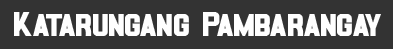
<style>
.page{position:relative;width:393px;height:49px;background:#333333}
.page>*{position:absolute;margin:0}
.t1{font:8.2px "SUPERPUNCH";color:#ffffff;scale:1.11 1}
</style>
<div class="page">
<p class="t1" style="left:14px;top:12px;width:367px;height:24px;text-align:center">Katarungang Pambarangay</p>
</div>
